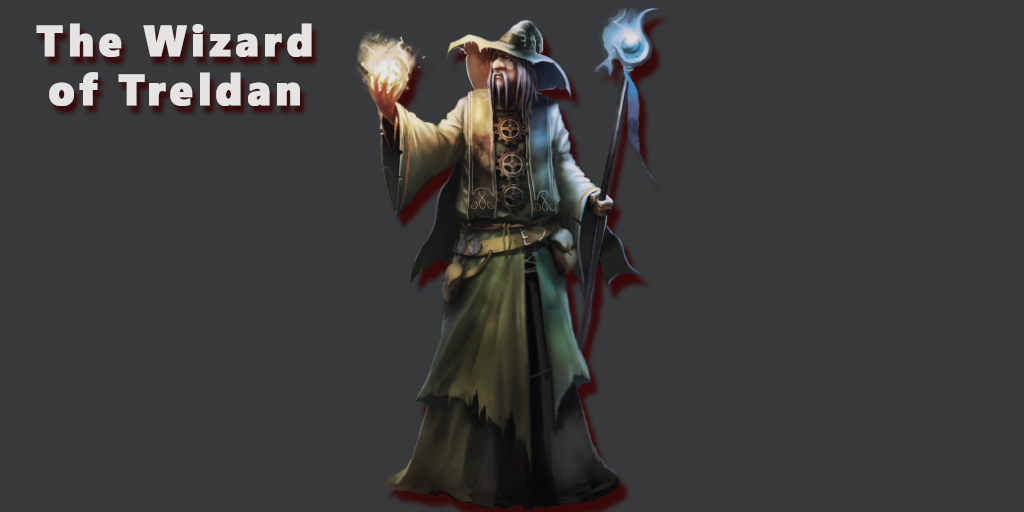
<style>
.page{position:relative;width:1024px;height:512px;background:#37393b}
.page>*{position:absolute;margin:0}
.t1{font:43.9px "SegoeWP-Black";letter-spacing:0.1em;color:#e5e4e2;font-weight:bold;scale:0.93 1}
</style>
<div class="page">
<p class="t1" style="left:36px;top:23px;width:276px;height:83px;text-align:center">The Wizard<br>of Treldan</p>
</div>
